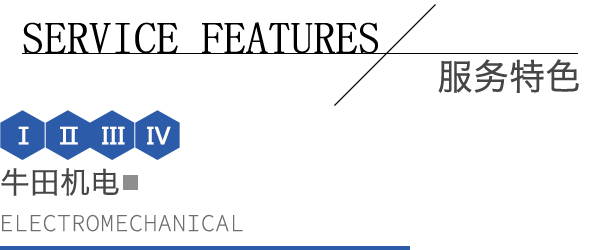
<style>
.page{position:relative;width:600px;height:250px;background:#ffffff}
.page>*{position:absolute;margin:0}
.t1{font:44.5px "SimSun";letter-spacing:-0.025em;color:#000000;text-transform:uppercase;font-weight:bold}
.t2{font:36px "HiraginoSansGB-W3";letter-spacing:-0.025em;color:#474647;text-transform:uppercase;font-weight:bold}
.t3{font:23.1px "MicrosoftYaHei";letter-spacing:0.025em;color:#ffffff;font-weight:bold}
.t4{font:30px "HiraginoSansGB-W3";letter-spacing:-0.025em;color:#474647;text-transform:uppercase;font-weight:bold}
.t5{font:24px "SourceCodePro-Light";color:#6e6e6e}
</style>
<div class="page">
<p class="t1" style="left:23px;top:22px;width:355px;height:32px">Service Features</p>
<p class="t2" style="left:438px;top:59px;width:141px;height:34px">服务特色</p>
<p class="t3" style="left:18px;top:126px;width:11px;height:19px">Ⅰ</p>
<p class="t3" style="left:60px;top:126px;width:18px;height:19px">Ⅱ</p>
<p class="t3" style="left:102px;top:126px;width:23px;height:19px">III</p>
<p class="t3" style="left:147px;top:126px;width:24px;height:19px">IV</p>
<p class="t4" style="left:1px;top:168px;width:118px;height:28px">牛田机电</p>
<p class="t5" style="left:2px;top:214px;width:241px;height:18px">ELECTROMECHANICAL</p>
</div>
